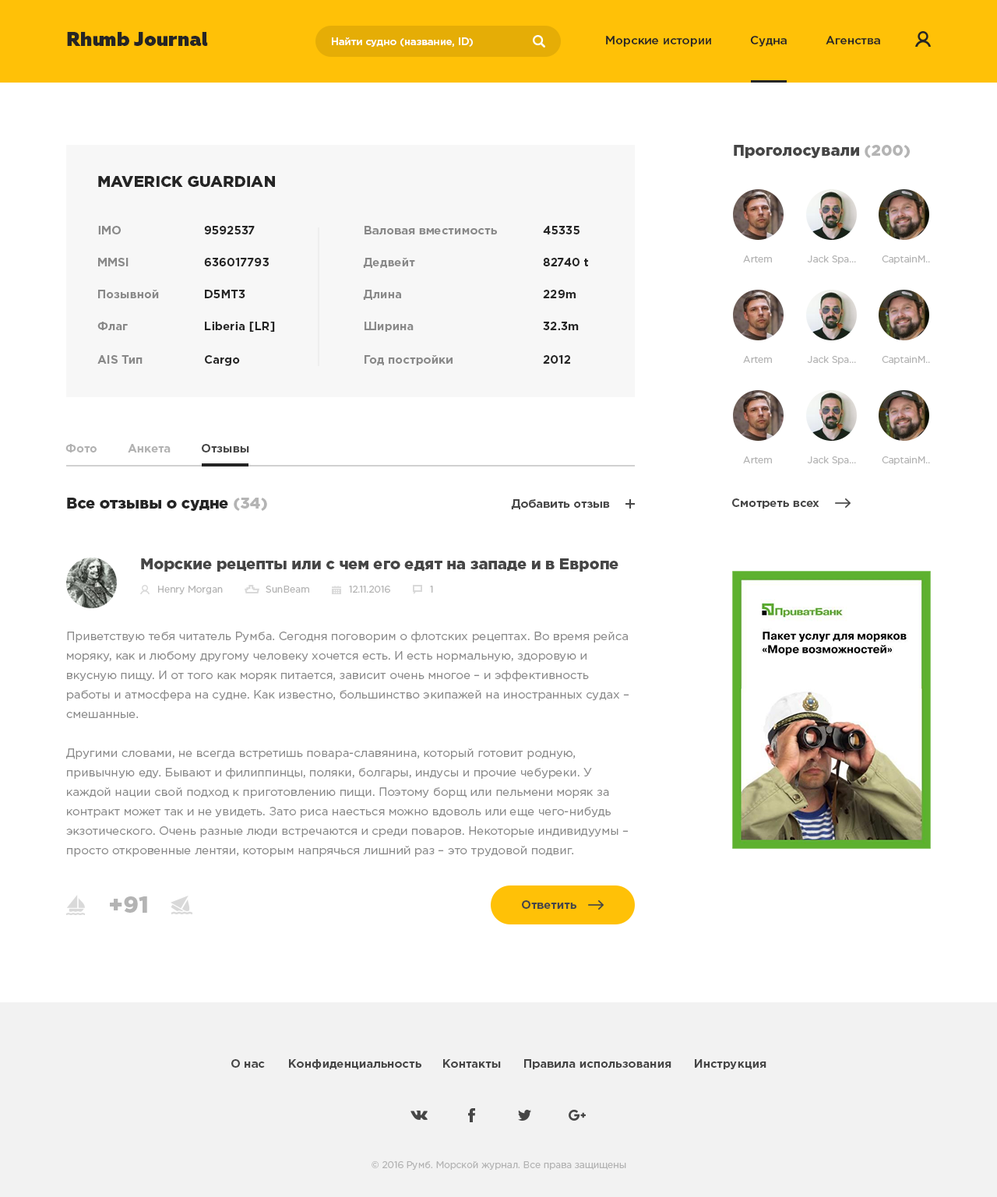
<style>
.page{position:relative;width:997px;height:1197px;background:#ffffff}
.page>*{position:absolute;margin:0}
.t1{font:19.5px "Geometria-Heavy";color:#252525}
.t2{font:10.1px "GothamPro-Medium";color:#ffffff}
.t3{font:11.7px "GothamPro-Medium";color:#252525}
.t4{font:15.6px "GothamPro-Black";color:#464646}
.t5{font:15.6px "GothamPro-Black";color:#b4b4b4}
.t6{font:15.6px "GothamPro-Black";color:#252525}
.t7{font:11.7px "GothamPro-Bold";color:#898989}
.t8{font:11.7px "GothamPro-Bold";color:#252525}
.t9{font:9.3px "GothamPro";color:#b4b4b4}
.t10{font:11.7px "GothamPro-Bold";color:#b2b2b2}
.t11{font:11.7px "GothamPro-Bold";color:#464646}
.t12{font:11.7px/19.5px "GothamPro";color:#898989}
.t13{font:23.4px "GothamPro-Black";color:#b4b4b4}
</style>
<div class="page">
<p class="t1" style="left:67px;top:32px;width:141px;height:14px">Rhumb Journal</p>
<p class="t2" style="left:332px;top:37px;width:141px;height:10px">Найти судно (название, ID)</p>
<p class="t3" style="left:606px;top:36px;width:105px;height:11px">Морские истории</p>
<p class="t3" style="left:750px;top:36px;width:36px;height:11px">Судна</p>
<p class="t3" style="left:825px;top:36px;width:55px;height:8px">Агенства</p>
<p class="t4" style="left:733px;top:145px;width:176px;height:13px">Проголосували <span class="t5">(200)</span></p>
<p class="t6" style="left:98px;top:176px;width:177px;height:11px">MAVERICK GUARDIAN</p>
<p class="t7" style="left:98px;top:226px;width:23px;height:8px">IMO</p>
<p class="t8" style="left:204px;top:226px;width:51px;height:8px">9592537</p>
<p class="t7" style="left:364px;top:226px;width:133px;height:8px">Валовая вместимость</p>
<p class="t8" style="left:543px;top:226px;width:36px;height:8px">45335</p>
<p class="t7" style="left:98px;top:258px;width:30px;height:8px">MMSI</p>
<p class="t8" style="left:204px;top:258px;width:65px;height:8px">636017793</p>
<p class="t7" style="left:363px;top:258px;width:52px;height:10px">Дедвейт</p>
<p class="t8" style="left:543px;top:258px;width:45px;height:8px">82740 t</p>
<p class="t9" style="left:743px;top:255px;width:29px;height:7px">Artem</p>
<p class="t9" style="left:807px;top:255px;width:49px;height:9px">Jack Spa...</p>
<p class="t9" style="left:881px;top:255px;width:49px;height:9px">CaptainM...</p>
<p class="t7" style="left:98px;top:290px;width:61px;height:8px">Позывной</p>
<p class="t8" style="left:205px;top:290px;width:40px;height:8px">D5MT3</p>
<p class="t7" style="left:363px;top:290px;width:38px;height:10px">Длина</p>
<p class="t8" style="left:543px;top:290px;width:32px;height:8px">229m</p>
<p class="t7" style="left:97px;top:322px;width:31px;height:8px">Флаг</p>
<p class="t8" style="left:205px;top:322px;width:70px;height:10px">Liberia [LR]</p>
<p class="t7" style="left:364px;top:322px;width:49px;height:10px">Ширина</p>
<p class="t8" style="left:543px;top:322px;width:35px;height:8px">32.3m</p>
<p class="t7" style="left:97px;top:355px;width:45px;height:9px">AIS Тип</p>
<p class="t8" style="left:205px;top:355px;width:35px;height:11px">Cargo</p>
<p class="t7" style="left:364px;top:355px;width:88px;height:10px">Год постройки</p>
<p class="t8" style="left:543px;top:355px;width:27px;height:9px">2012</p>
<p class="t9" style="left:743px;top:356px;width:29px;height:7px">Artem</p>
<p class="t9" style="left:807px;top:356px;width:49px;height:8px">Jack Spa...</p>
<p class="t9" style="left:881px;top:356px;width:49px;height:8px">CaptainM...</p>
<p class="t10" style="left:65px;top:444px;width:32px;height:8px">Фото</p>
<p class="t10" style="left:128px;top:444px;width:42px;height:8px">Анкета</p>
<p class="t11" style="left:202px;top:444px;width:47px;height:8px">Отзывы</p>
<p class="t9" style="left:743px;top:456px;width:29px;height:7px">Artem</p>
<p class="t9" style="left:807px;top:456px;width:49px;height:9px">Jack Spa...</p>
<p class="t9" style="left:881px;top:456px;width:49px;height:9px">CaptainM...</p>
<p class="t6" style="left:67px;top:497px;width:200px;height:14px">Все отзывы о судне <span class="t5">(34)</span></p>
<p class="t11" style="left:511px;top:499px;width:99px;height:10px">Добавить отзыв</p>
<p class="t11" style="left:732px;top:498px;width:87px;height:10px">Смотреть всех</p>
<p class="t4" style="left:141px;top:558px;width:477px;height:13px">Морские рецепты или с чем его едят на западе и в Европе</p>
<p class="t9" style="left:158px;top:585px;width:65px;height:10px">Henry Morgan</p>
<p class="t9" style="left:265px;top:585px;width:44px;height:7px">SunBeam</p>
<p class="t9" style="left:349px;top:585px;width:41px;height:7px">12.11.2016</p>
<p class="t9" style="left:430px;top:585px;width:3px;height:7px">1</p>
<p class="t12" style="left:66px;top:631px;width:563px;height:225px">Приветствую тебя читатель Румба. Сегодня поговорим о флотских рецептах. Во время рейса моряку, как и любому другому человеку хочется есть. И есть нормальную, здоровую и вкусную пищу. И от того как моряк питается, зависит очень многое – и эффективность работы и атмосфера на судне. Как известно, большинство экипажей на иностранных судах – смешанные.<br><br>Другими словами, не всегда встретишь повара-славянина, который готовит родную, привычную еду. Бывают и филиппинцы, поляки, болгары, индусы и прочие чебуреки. У каждой нации свой подход к приготовлению пищи. Поэтому борщ или пельмени моряк за контракт может так и не увидеть. Зато риса наесться можно вдоволь или еще чего-нибудь экзотического. Очень разные люди встречаются и среди поваров. Некоторые индивидуумы – просто откровенные лентяи, которым напрячься лишний раз – это трудовой подвиг.<br><br>Если пищу готовит вчерашний сталевар-шаурмен, который в салат из соленых огурцов добавляет свежие фрукты со сметаной и доводит экипаж своими кулинарными изысками до безудержной срачки, то о какой нормальной работе может идти речь. С другой стороны, на судах работают и прекрасные, ответственные повара, которые знают как готовить, любят свою профессию и делают все с душой.</p>
<p class="t13" style="left:110px;top:896px;width:37px;height:16px">+91</p>
<p class="t11" style="left:522px;top:900px;width:54px;height:9px">Ответить</p>
<p class="t11" style="left:231px;top:1059px;width:34px;height:8px">О нас</p>
<p class="t11" style="left:289px;top:1059px;width:132px;height:10px">Конфиденциальность</p>
<p class="t11" style="left:443px;top:1059px;width:58px;height:8px">Контакты</p>
<p class="t11" style="left:524px;top:1059px;width:147px;height:10px">Правила использования</p>
<p class="t11" style="left:694px;top:1059px;width:72px;height:10px">Инструкция</p>
<p class="t9" style="left:371px;top:1161px;width:255px;height:9px">© 2016 Румб. Морской журнал. Все права защищены</p>
</div>
